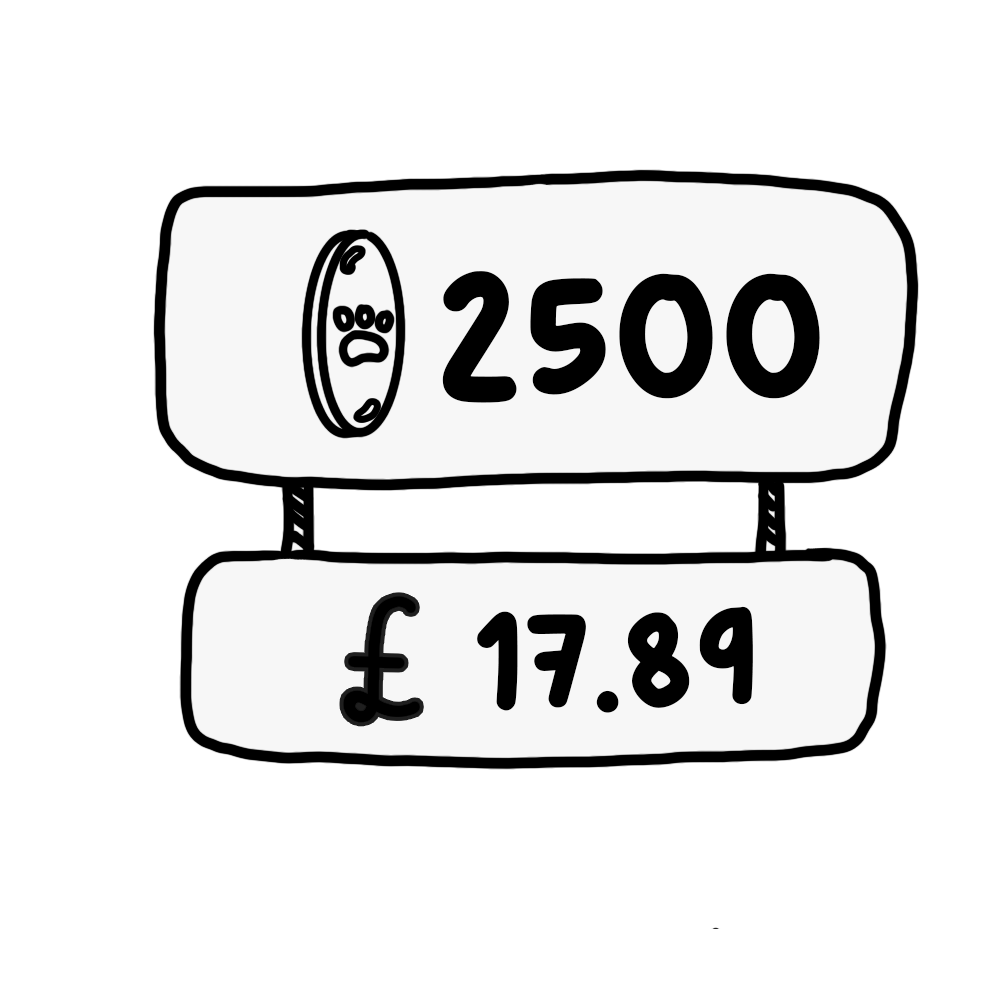
<style>
.page{position:relative;width:1000px;height:1000px;background:#ffffff}
.page>*{position:absolute;margin:0}
.t1{font:238.1px "HangryHand-Regular";color:#000000}
.t2{font:176.5px "HangryHand-Regular";color:#000000}
</style>
<div class="page">
<p class="t1" style="left:442px;top:271px;width:378px;height:132px">2500</p>
<p class="t2" style="left:477px;top:606px;width:276px;height:107px">17.89</p>
</div>
